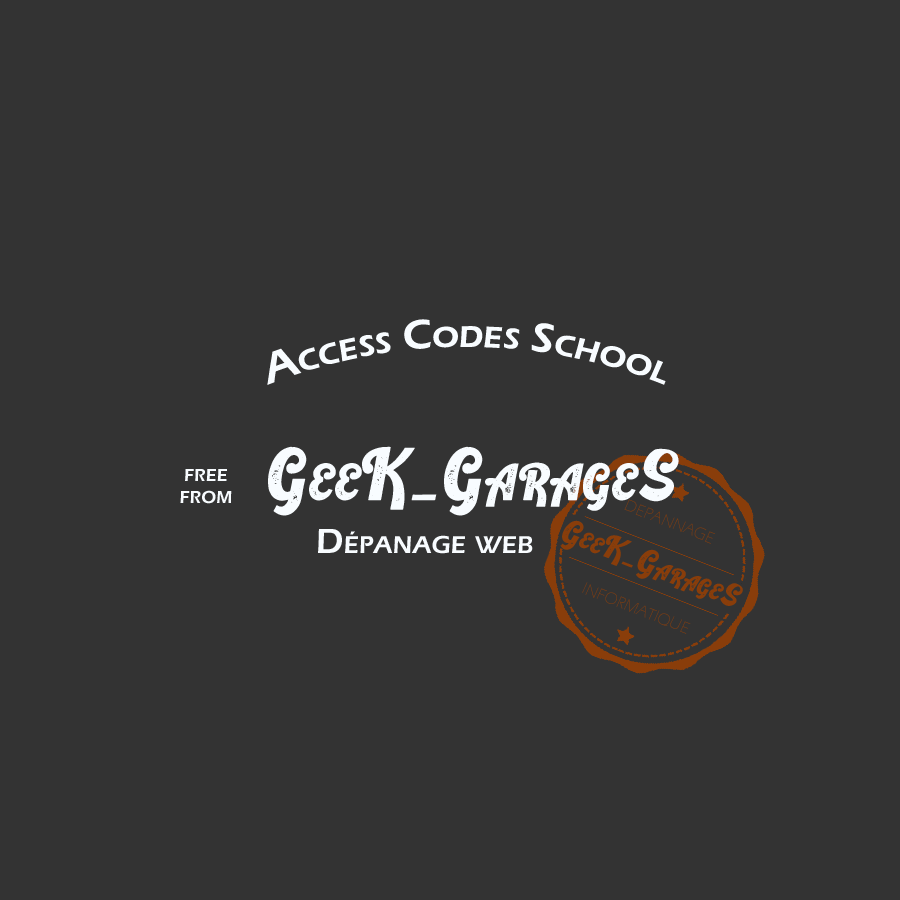
<style>
.page{position:relative;width:900px;height:900px;background:#333333}
.page>*{position:absolute;margin:0}
.t1{font:43.6px "ErasITC-Demi";color:#f8fcff;font-variant:small-caps}
.t2{font:72px "RetrokingRegular";color:#f8fcff;font-variant:small-caps}
.t3{font:18px "ErasITC-Demi";color:#f8fcff;font-variant:small-caps}
.t4{font:16.6px "ErasITC-Light";font-variant:small-caps}
.t5{font:33.2px "RetrokingRegular";color:#893d0a;font-variant:small-caps}
.t6{font:36px "ErasITC-Demi";color:#f8fcff;font-variant:small-caps}
</style>
<div class="page">
<p class="t1" style="left:267px;top:319px;width:399px;height:66px">Access Codes School</p>
<p class="t2" style="left:268px;top:446px;width:411px;height:70px">GeeK_GarageS</p>
<p class="t3" style="left:180px;top:469px;width:52px;height:35px;text-align:center">FREE<br>FROM</p>
<p class="t4" style="left:624px;top:499px;width:91px;height:45px;rotate:21deg">DEPANNAGE</p>
<p class="t5" style="left:560px;top:520px;width:183px;height:86px;rotate:21deg">GeeK_GarageS</p>
<p class="t6" style="left:318px;top:529px;width:215px;height:25px">Dépanage web</p>
<p class="t4" style="left:582px;top:582px;width:109px;height:52px;rotate:21deg">INFORMATIQUE</p>
</div>
